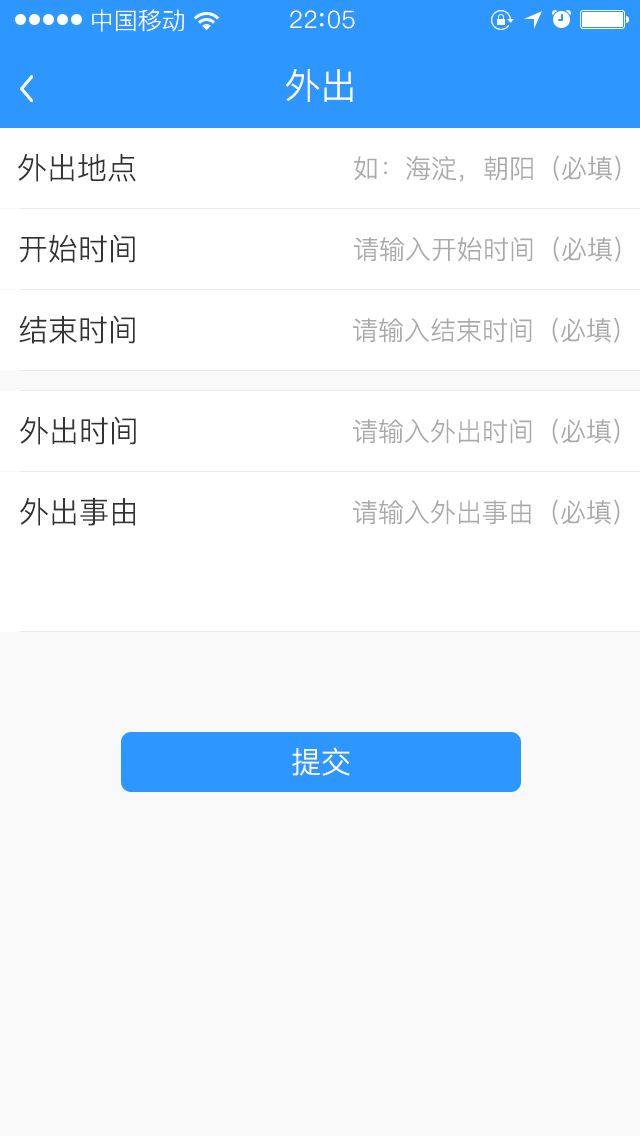
<style>
.page{position:relative;width:640px;height:1136px;background:#ffffff}
.page>*{position:absolute;margin:0}
.t1{font:24px "PingFang-SC-Regular";color:#ffffff}
.t2{font:24px "PingFang-SC-Regular";letter-spacing:0.03em;color:#ffffff}
.t3{font:36px "PingFang-SC-Regular";color:#ffffff}
.t4{font:30px "PingFang-SC-Regular";color:#333333}
.t5{font:26px "PingFang-SC-Regular";color:#aaaaaa}
.t6{font:30px "PingFang-SC-Regular";color:#ffffff}
</style>
<div class="page">
<p class="t1" style="left:92px;top:9px;width:92px;height:23px">中国移动</p>
<p class="t2" style="left:290px;top:10px;width:65px;height:19px">22 05</p>
<p class="t3" style="left:286px;top:69px;width:67px;height:33px">外出</p>
<p class="t4" style="left:18px;top:154px;width:118px;height:28px">外出地点</p>
<p class="t5" style="left:354px;top:155px;width:267px;height:27px">如：海淀，朝阳（必填）</p>
<p class="t4" style="left:19px;top:234px;width:116px;height:29px">开始时间</p>
<p class="t5" style="left:354px;top:236px;width:267px;height:26px">请输入开始时间（必填）</p>
<p class="t4" style="left:19px;top:315px;width:116px;height:29px">结束时间</p>
<p class="t5" style="left:353px;top:317px;width:267px;height:26px">请输入结束时间（必填）</p>
<p class="t4" style="left:20px;top:416px;width:116px;height:29px">外出时间</p>
<p class="t5" style="left:353px;top:418px;width:267px;height:26px">请输入外出时间（必填）</p>
<p class="t4" style="left:20px;top:497px;width:115px;height:29px">外出事由</p>
<p class="t5" style="left:353px;top:499px;width:267px;height:26px">请输入外出事由（必填）</p>
<p class="t6" style="left:292px;top:747px;width:58px;height:29px">提交</p>
</div>
